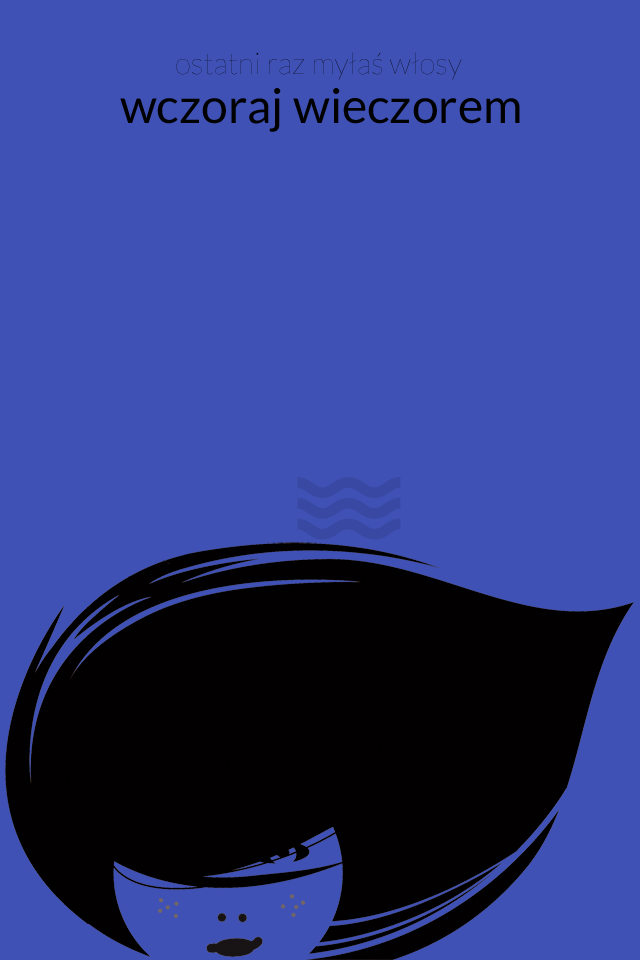
<style>
.page{position:relative;width:640px;height:960px;background:#3f51b5}
.page>*{position:absolute;margin:0}
.t1{font:30px "Lato-Hairline";color:#000000}
.t2{font:48px "Lato-Regular";color:#000000}
</style>
<div class="page">
<p class="t1" style="left:176px;top:52px;width:286px;height:28px">ostatni raz myłaś włosy</p>
<p class="t2" style="left:120px;top:88px;width:400px;height:44px">wczoraj wieczorem</p>
</div>
